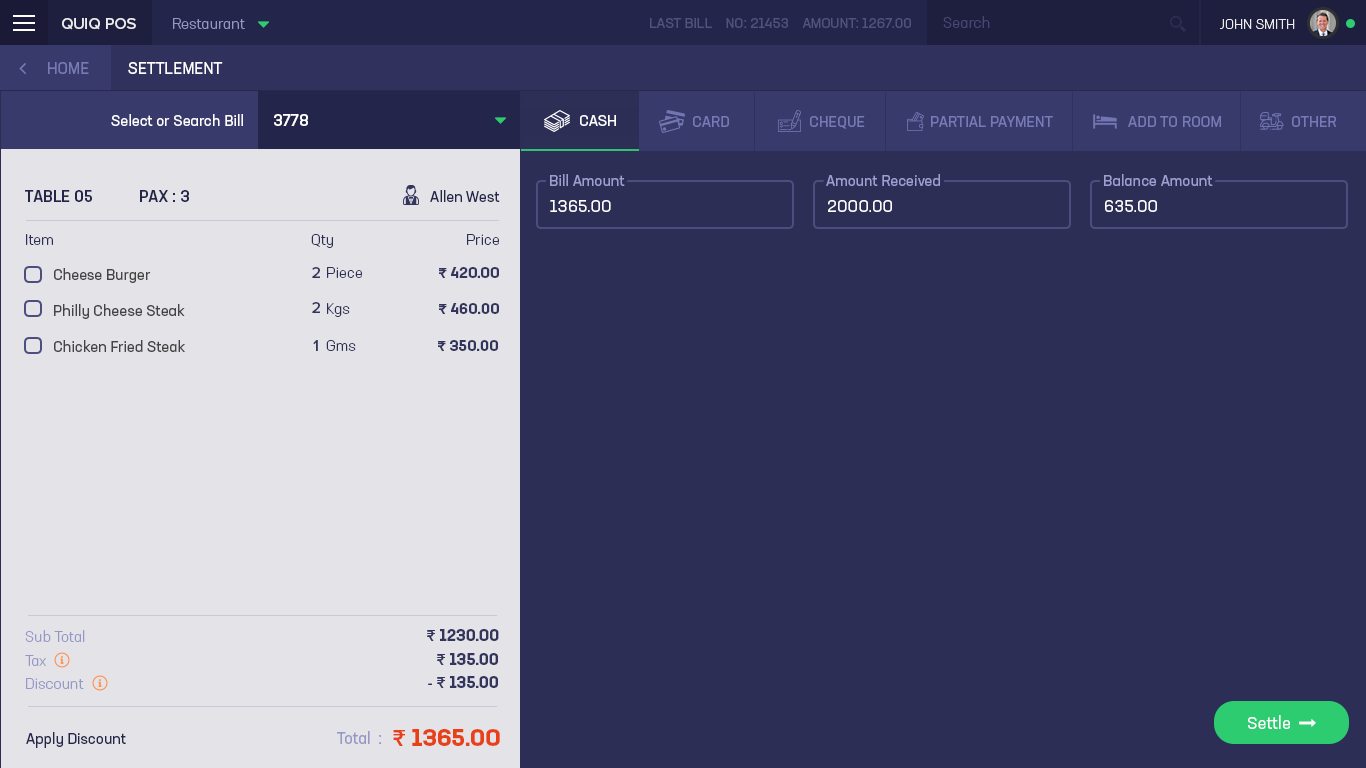
<style>
.page{position:relative;width:1366px;height:768px;background:#2c2e56}
.page>*{position:absolute;margin:0}
.t1{font:15px "NeusaNextStd-Light";color:#474975}
.t2{font:16px "ProximaNova-Medium";color:#ededed}
.t3{font:15px "NeusaNextStd-Light";color:#9597c4}
.t4{font:14px "NeusaNextStd-Regular";color:#50537d;text-transform:uppercase}
.t5{font:14px "NeusaNextStd-Light";color:#ededed;text-transform:uppercase}
.t6{font:16px "NeusaNextStd-Regular";color:#767ab5;text-transform:uppercase}
.t7{font:16px "NeusaNextStd-Regular";color:#ffffff;text-transform:uppercase}
.t8{font:15px "NeusaNextStd-Regular";color:#ffffff}
.t9{font:16px "NeusaNextStd-Medium";color:#ffffff;text-transform:uppercase}
.t10{font:15px "NeusaNextStd-Regular";color:#ffffff;text-transform:uppercase}
.t11{font:15px "NeusaNextStd-Regular";color:#767ab5;text-transform:uppercase}
.t12{font:15px "NeusaNextStd-Regular";color:#9c9fd1}
.t13{font:16px "NeusaNextStd-Medium";color:#23254a;text-transform:uppercase}
.t14{font:15px "NeusaNextStd-Regular";color:#23254a}
.t15{font:17px "NeusaNextStd-Regular";color:#ffffff}
.t16{font:15px "NeusaNextStd-Light";color:#2c2e56}
.t17{font:15px "NeusaNextStd-Regular";color:#444444}
.t18{font:16px "ProximaNova-Medium";color:#33355d}
.t19{font:15px "NeusaNextStd-Bold";color:#33355d}
.t20{font:15px "ProximaNova-Semibold";color:#33355d}
.t21{font:16px "NeusaNextStd-Bold";color:#33355d}
.t22{font:16px "ProximaNova-Semibold";color:#33355d}
.t23{font:16px "NeusaNextStd-Regular";color:#9597c4}
.t24{font:24px "NeusaNextStd-Bold";color:#e84118}
.t25{font:24px "ProximaNova-Semibold";color:#e84118}
</style>
<div class="page">
<p class="t1" style="left:943px;top:16px;width:47px;height:12px">Search</p>
<p class="t2" style="left:62px;top:18px;width:74px;height:12px">QUIQ POS</p>
<p class="t3" style="left:173px;top:18px;width:72px;height:11px">Restaurant</p>
<p class="t4" style="left:650px;top:18px;width:261px;height:10px">Last Bill    NO: 21453    Amount: 1267.00</p>
<p class="t5" style="left:1220px;top:19px;width:75px;height:10px">John Smith</p>
<p class="t6" style="left:48px;top:62px;width:41px;height:12px">Home</p>
<p class="t7" style="left:128px;top:62px;width:95px;height:12px">Settlement</p>
<p class="t8" style="left:111px;top:114px;width:132px;height:12px">Select or Search Bill</p>
<p class="t9" style="left:274px;top:114px;width:34px;height:12px">3778</p>
<p class="t10" style="left:580px;top:115px;width:36px;height:11px">Cash</p>
<p class="t11" style="left:693px;top:116px;width:36px;height:11px">Card</p>
<p class="t11" style="left:810px;top:116px;width:55px;height:13px">Cheque</p>
<p class="t11" style="left:931px;top:116px;width:122px;height:11px">Partial Payment</p>
<p class="t11" style="left:1128px;top:116px;width:93px;height:11px">Add to Room</p>
<p class="t11" style="left:1292px;top:116px;width:44px;height:11px">Other</p>
<p class="t12" style="left:550px;top:174px;width:75px;height:12px">Bill Amount</p>
<p class="t12" style="left:826px;top:174px;width:114px;height:12px">Amount Received</p>
<p class="t12" style="left:1104px;top:174px;width:109px;height:12px">Balance Amount</p>
<p class="t13" style="left:25px;top:190px;width:67px;height:12px">Table 05</p>
<p class="t13" style="left:140px;top:190px;width:49px;height:12px">PAX : 3</p>
<p class="t14" style="left:430px;top:190px;width:70px;height:12px">Allen West</p>
<p class="t15" style="left:550px;top:200px;width:61px;height:12px">1365.00</p>
<p class="t15" style="left:828px;top:200px;width:64px;height:12px">2000.00</p>
<p class="t15" style="left:1105px;top:200px;width:52px;height:12px">635.00</p>
<p class="t16" style="left:26px;top:234px;width:27px;height:11px">Item</p>
<p class="t16" style="left:311px;top:234px;width:22px;height:14px">Qty</p>
<p class="t16" style="left:467px;top:234px;width:32px;height:11px">Price</p>
<p class="t17" style="left:54px;top:268px;width:97px;height:15px">Cheese Burger</p>
<p class="t18" style="left:312px;top:267px;width:8px;height:11px">2</p>
<p class="t16" style="left:327px;top:267px;width:35px;height:11px">Piece</p>
<p class="t19" style="left:439px;top:267px;width:60px;height:11px"><span class="t20">₹</span> 420.00</p>
<p class="t17" style="left:54px;top:304px;width:131px;height:15px">Philly Cheese Steak</p>
<p class="t18" style="left:312px;top:302px;width:8px;height:11px">2</p>
<p class="t16" style="left:327px;top:303px;width:23px;height:14px">Kgs</p>
<p class="t19" style="left:439px;top:303px;width:60px;height:11px"><span class="t20">₹</span> 460.00</p>
<p class="t17" style="left:54px;top:340px;width:131px;height:12px">Chicken Fried Steak</p>
<p class="t18" style="left:313px;top:340px;width:5px;height:11px">1</p>
<p class="t16" style="left:326px;top:340px;width:30px;height:11px">Gms</p>
<p class="t19" style="left:438px;top:340px;width:60px;height:11px"><span class="t20">₹</span> 350.00</p>
<p class="t3" style="left:25px;top:630px;width:60px;height:12px">Sub Total</p>
<p class="t21" style="left:427px;top:629px;width:72px;height:12px"><span class="t22">₹</span> 1230.00</p>
<p class="t21" style="left:437px;top:653px;width:61px;height:12px"><span class="t22">₹</span> 135.00</p>
<p class="t3" style="left:25px;top:655px;width:21px;height:11px">Tax</p>
<p class="t3" style="left:26px;top:678px;width:58px;height:11px">Discount</p>
<p class="t21" style="left:428px;top:676px;width:70px;height:12px"><span class="t22">- ₹</span> 135.00</p>
<p class="t14" style="left:26px;top:732px;width:100px;height:16px">Apply Discount</p>
<p class="t23" style="left:337px;top:731px;width:44px;height:13px">Total  :</p>
<p class="t24" style="left:393px;top:729px;width:107px;height:17px"><span class="t25">₹</span> 1365.00</p>
</div>
